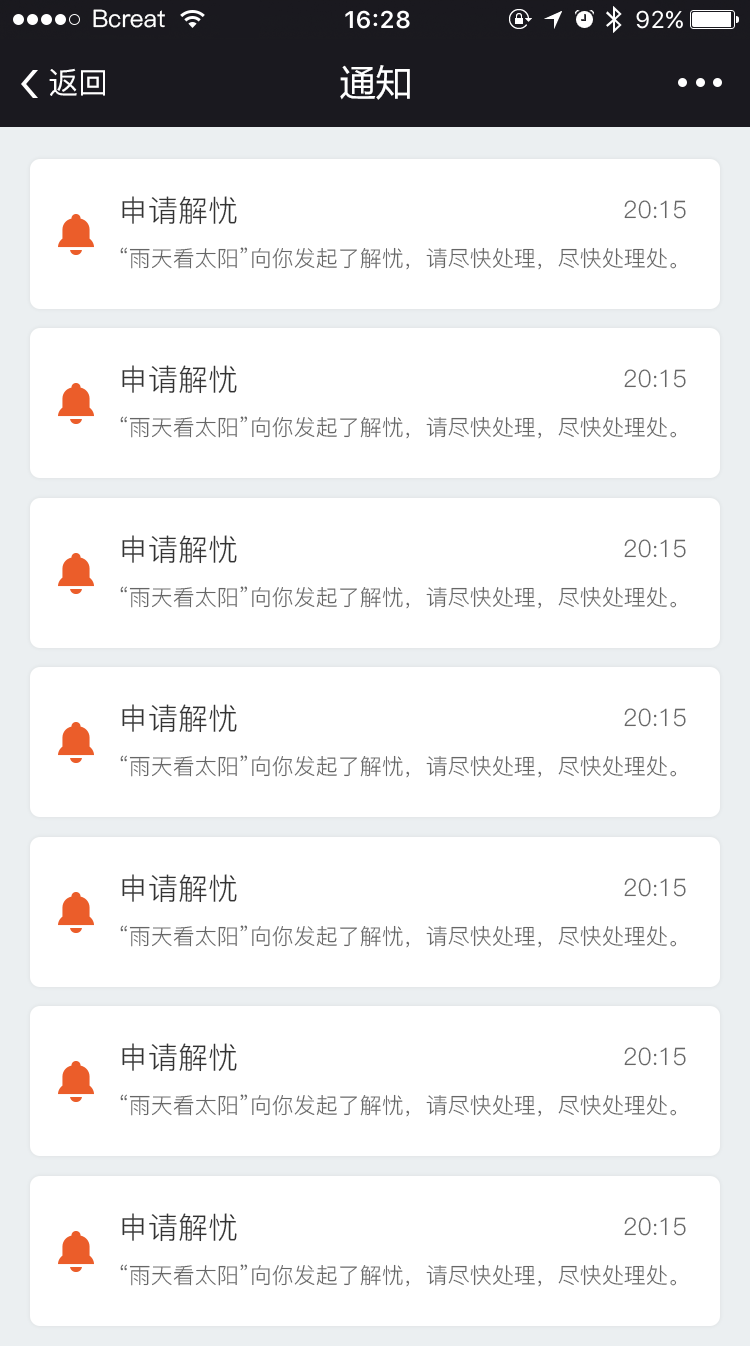
<style>
.page{position:relative;width:750px;height:1346px;background:#ffffff}
.page>*{position:absolute;margin:0}
.t1{font:24px "PingFang-SC-Medium";color:#ffffff}
.t2{font:36px "MicrosoftYaHei";color:#ffffff}
.t3{font:30px "PingFang-SC-Medium";color:#ffffff}
.t4{font:30px "PingFang-SC-Regular";color:#333333}
.t5{font:24px "PingFang-SC-Regular";color:#666666}
.t6{font:22px "PingFang-SC-Regular";color:#666666}
</style>
<div class="page">
<p class="t1" style="left:93px;top:9px;width:72px;height:19px">Bcreat</p>
<p class="t2" style="left:340px;top:65px;width:70px;height:35px">通知</p>
<p class="t3" style="left:49px;top:68px;width:56px;height:28px">返回</p>
<p class="t4" style="left:122px;top:196px;width:115px;height:29px">申请解忧</p>
<p class="t5" style="left:624px;top:200px;width:62px;height:19px">20:15</p>
<p class="t6" style="left:120px;top:247px;width:557px;height:23px">“雨天看太阳”向你发起了解忧，请尽快处理，尽快处理处。</p>
<p class="t4" style="left:122px;top:365px;width:115px;height:29px">申请解忧</p>
<p class="t5" style="left:624px;top:369px;width:62px;height:19px">20:15</p>
<p class="t6" style="left:120px;top:416px;width:557px;height:23px">“雨天看太阳”向你发起了解忧，请尽快处理，尽快处理处。</p>
<p class="t4" style="left:122px;top:535px;width:115px;height:29px">申请解忧</p>
<p class="t5" style="left:624px;top:539px;width:62px;height:19px">20:15</p>
<p class="t6" style="left:120px;top:586px;width:557px;height:23px">“雨天看太阳”向你发起了解忧，请尽快处理，尽快处理处。</p>
<p class="t4" style="left:122px;top:704px;width:115px;height:29px">申请解忧</p>
<p class="t5" style="left:624px;top:708px;width:62px;height:19px">20:15</p>
<p class="t6" style="left:120px;top:755px;width:557px;height:23px">“雨天看太阳”向你发起了解忧，请尽快处理，尽快处理处。</p>
<p class="t4" style="left:122px;top:874px;width:115px;height:29px">申请解忧</p>
<p class="t5" style="left:624px;top:878px;width:62px;height:19px">20:15</p>
<p class="t6" style="left:120px;top:925px;width:557px;height:23px">“雨天看太阳”向你发起了解忧，请尽快处理，尽快处理处。</p>
<p class="t4" style="left:122px;top:1043px;width:115px;height:29px">申请解忧</p>
<p class="t5" style="left:624px;top:1047px;width:62px;height:19px">20:15</p>
<p class="t6" style="left:120px;top:1094px;width:557px;height:23px">“雨天看太阳”向你发起了解忧，请尽快处理，尽快处理处。</p>
<p class="t4" style="left:122px;top:1213px;width:115px;height:29px">申请解忧</p>
<p class="t5" style="left:624px;top:1217px;width:62px;height:19px">20:15</p>
<p class="t6" style="left:120px;top:1264px;width:557px;height:23px">“雨天看太阳”向你发起了解忧，请尽快处理，尽快处理处。</p>
</div>
